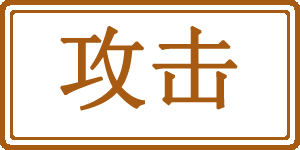
<style>
.page{position:relative;width:300px;height:150px;background:#ffffff}
.page>*{position:absolute;margin:0}
.t1{font:90px "SimSun";color:#a75a11;font-weight:bold}
</style>
<div class="page">
<p class="t1" style="left:60px;top:26px;width:178px;height:85px">攻击</p>
</div>
